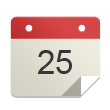
<style>
.page{position:relative;width:110px;height:110px;background:#ffffff}
.page>*{position:absolute;margin:0}
.t1{font:33.1px "ArialMT";color:#37353a}
</style>
<div class="page">
<p class="t1" style="left:38px;top:50px;width:34px;height:24px">25</p>
</div>
